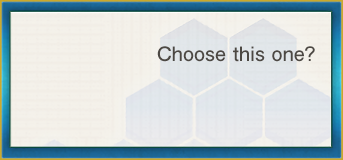
<style>
.page{position:relative;width:343px;height:160px}
.page>*{position:absolute;margin:0}
.t1{font:20px "FutoGoB101Pr5-Bold";color:#4c4843}
</style>
<div class="page">
<p class="t1" style="left:157px;top:46px;width:158px;height:16px">Choose this one?</p>
</div>
